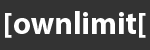
<style>
.page{position:relative;width:150px;height:50px;background:#333333}
.page>*{position:absolute;margin:0}
.t1{font:31.2px "MyriadPro-Bold";color:#ffffff}
</style>
<div class="page">
<p class="t1" style="left:5px;top:11px;width:141px;height:27px">[ownlimit[</p>
</div>
